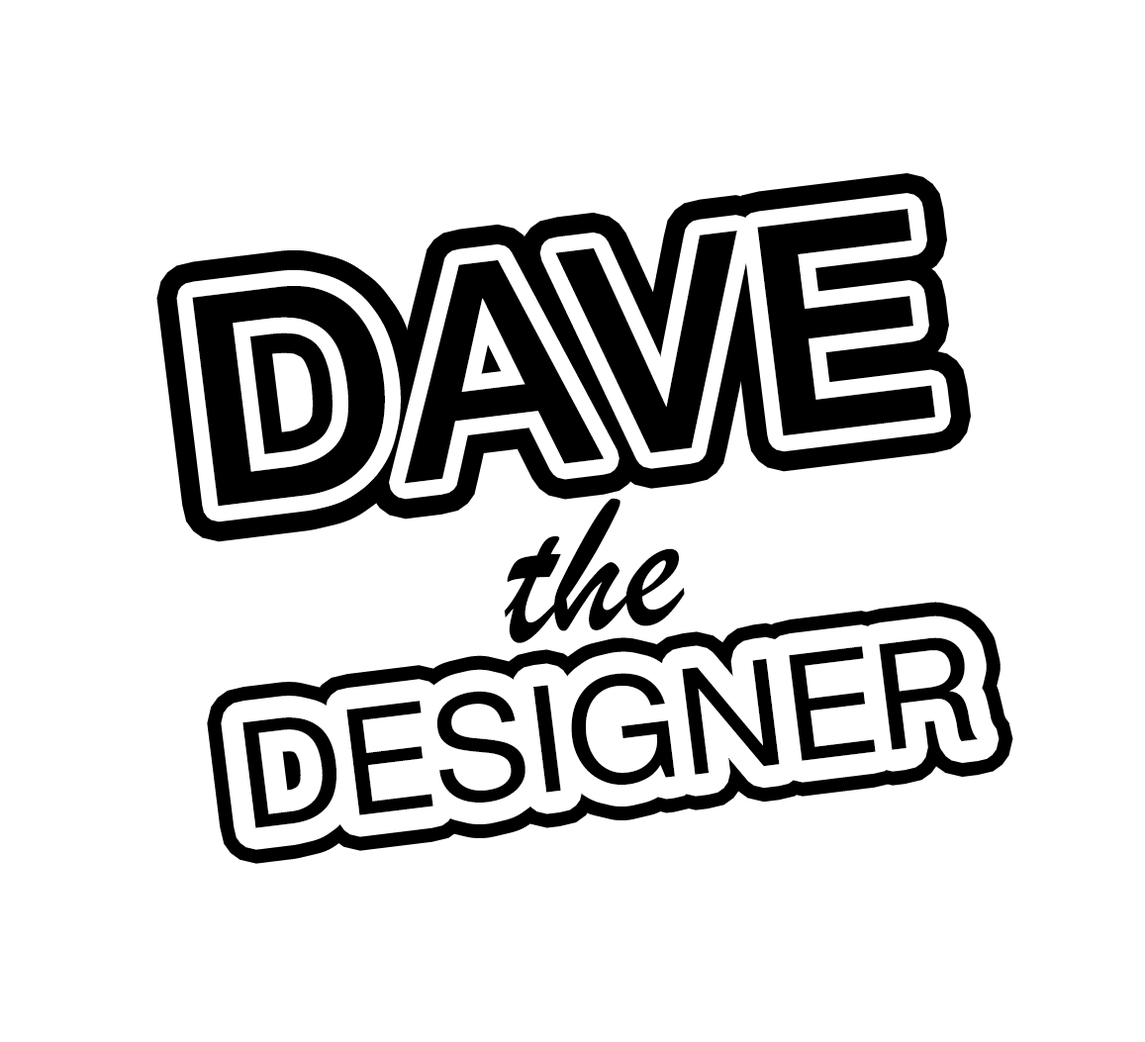
<style>
.page{position:relative;width:1145px;height:1042px;background:#ffffff}
.page>*{position:absolute;margin:0}
.t1{font:293.9px "HelveticaNeue-Medium";color:#000000}
.t2{font:197.9px "BrushScriptMT";color:#000000}
.t3{font:148.4px "HelveticaNeue";color:#000000}
</style>
<div class="page">
<p class="t1" style="left:192px;top:209px;width:743px;height:298px;rotate:-7deg">DAVE</p>
<p class="t2" style="left:504px;top:498px;width:181px;height:145px;rotate:-7deg">the</p>
<p class="t3" style="left:242px;top:637px;width:735px;height:191px;rotate:-7deg">DESIGNER</p>
</div>
